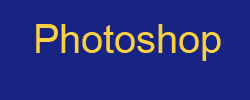
<style>
.page{position:relative;width:250px;height:100px;background:#172483}
.page>*{position:absolute;margin:0}
.t1{font:39.6px "ArialMT";color:#f9d043}
</style>
<div class="page">
<p class="t1" style="left:36px;top:24px;width:185px;height:37px">Photoshop</p>
</div>
